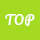
<style>
.page{position:relative;width:40px;height:40px;background:#a4da22}
.page>*{position:absolute;margin:0}
.t1{font:12.3px "Pacifico-Regular";letter-spacing:0.04em;color:#fffefe}
</style>
<div class="page">
<p class="t1" style="left:5px;top:14px;width:30px;height:12px">TOP</p>
</div>
